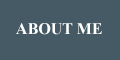
<style>
.page{position:relative;width:120px;height:60px;background:#455a64}
.page>*{position:absolute;margin:0}
.t1{font:16px "TimesNewRomanPS-BoldMT";color:#ffffff}
</style>
<div class="page">
<p class="t1" style="left:16px;top:23px;width:86px;height:12px">ABOUT ME</p>
</div>
